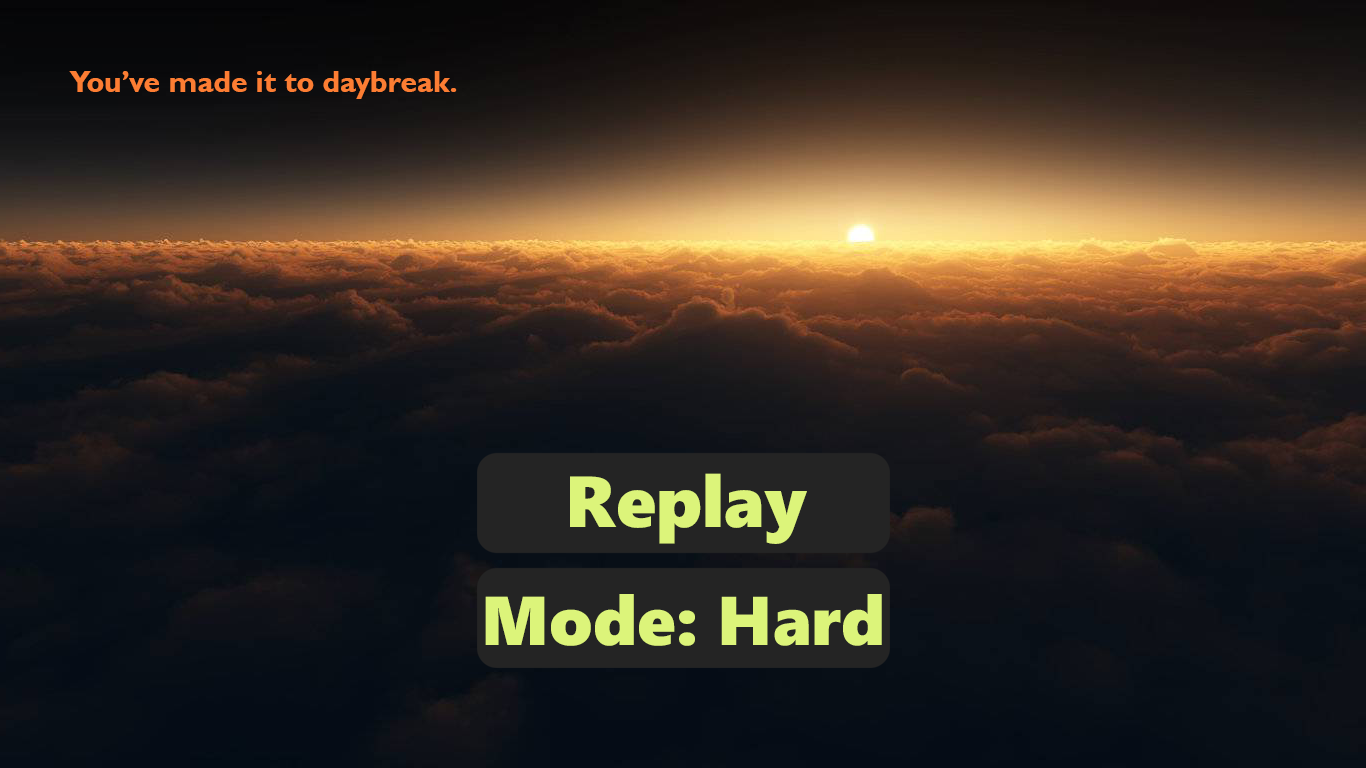
<style>
.page{position:relative;width:1366px;height:768px}
.page>*{position:absolute;margin:0}
.t1{font:30px "GillSansMT-Bold";color:#fc7d33}
.t2{font:72px "SegoeWP-Black";color:#dcf47a}
.t3{font:69px "SegoeWP-Black";color:#dcf47a}
</style>
<div class="page">
<p class="t1" style="left:69px;top:71px;width:388px;height:28px">You’ve made it to daybreak.</p>
<p class="t2" style="left:570px;top:473px;width:237px;height:71px">Replay</p>
<p class="t3" style="left:485px;top:594px;width:210px;height:52px">Mode:</p>
</div>
